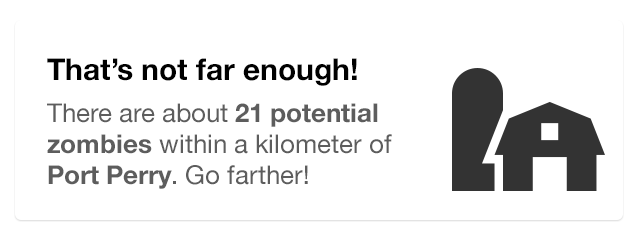
<style>
.page{position:relative;width:640px;height:240px;background:#ffffff}
.page>*{position:absolute;margin:0}
.t1{font:30px "HelveticaNeue-Bold";color:#000000}
.t2{font:26px "HelveticaNeue";color:#5d5d5d}
.t3{font:26px "HelveticaNeue-Bold";color:#5d5d5d}
</style>
<div class="page">
<p class="t1" style="left:47px;top:58px;width:345px;height:131px">That’s not far enough! <br><span class="t2">There are about </span><span class="t3">21 potential zombies </span><span class="t2">within a kilometer of </span><span class="t3">Port Perry</span><span class="t2">. Go farther!</span></p>
</div>
